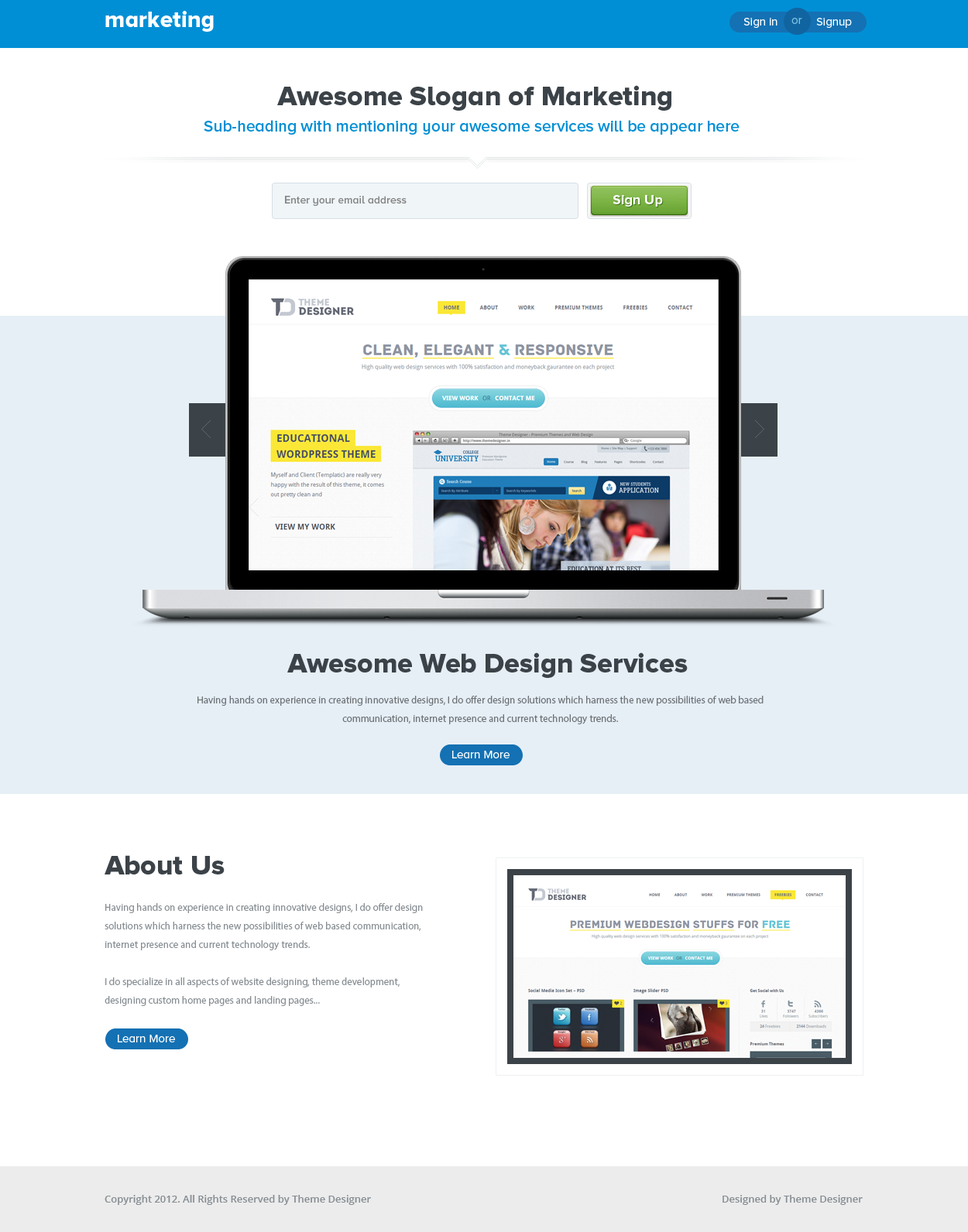
<style>
.page{position:relative;width:968px;height:1232px;background:#ffffff}
.page>*{position:absolute;margin:0}
.t1{font:23.2px "ProximaNovaA-Extrabld";color:#ffffff}
.t2{font:11.6px "ProximaNovaA-Regular";color:#ffffff}
.t3{font:11.6px "ProximaNovaA-Regular";color:#7ec0e0}
.t4{font:27.9px "ProximaNovaA-Extrabld";color:#3c4348}
.t5{font:16.3px "ProximaNovaA-Semibold";color:#008fd5}
.t6{font:10.8px "ProximaNovaA-Semibold";color:#848585}
.t7{font:13.9px "ProximaNovaA-Bold";color:#ffffff}
.t8{font:10.1px/18.6px "MyriadPro-Regular";color:#6e7377}
.t9{font:10.1px/18.6px "MyriadPro-Regular";color:#878e93}
.t10{font:10.1px "OpenSans-Semibold";color:#878e93}
</style>
<div class="page">
<p class="t1" style="left:105px;top:11px;width:109px;height:21px">marketing</p>
<p class="t2" style="left:743px;top:18px;width:34px;height:10px">Sign in</p>
<p class="t3" style="left:791px;top:18px;width:11px;height:6px">or</p>
<p class="t2" style="left:816px;top:18px;width:35px;height:10px">Signup</p>
<p class="t4" style="left:277px;top:85px;width:394px;height:26px">Awesome Slogan of Marketing</p>
<p class="t5" style="left:204px;top:120px;width:535px;height:15px">Sub-heading with mentioning your awesome services will be appear here</p>
<p class="t6" style="left:285px;top:196px;width:121px;height:10px">Enter your email address</p>
<p class="t7" style="left:612px;top:195px;width:51px;height:12px">Sign Up</p>
<p class="t4" style="left:287px;top:653px;width:400px;height:25px">Awesome Web Design Services</p>
<p class="t8" style="left:197px;top:696px;width:566px;height:29px;text-align:center">Having hands on experience in creating innovative designs, I do offer design solutions which harness the new possibilities of web based <br>communication, internet presence and current technology trends.</p>
<p class="t2" style="left:452px;top:751px;width:57px;height:8px">Learn More</p>
<p class="t4" style="left:105px;top:855px;width:119px;height:20px">About Us</p>
<p class="t9" style="left:105px;top:903px;width:318px;height:103px">Having hands on experience in creating innovative designs, I do offer design <br>solutions which harness the new possibilities of web based communication, <br>internet presence and current technology trends. <br><br>I do specialize in all aspects of website designing, theme development, <br>designing custom home pages and landing pages...</p>
<p class="t2" style="left:118px;top:1035px;width:57px;height:8px">Learn More</p>
<p class="t10" style="left:105px;top:1195px;width:266px;height:10px">Copyright 2012. All Rights Reserved by Theme Designer</p>
<p class="t10" style="left:722px;top:1195px;width:140px;height:10px">Designed by Theme Designer</p>
</div>
